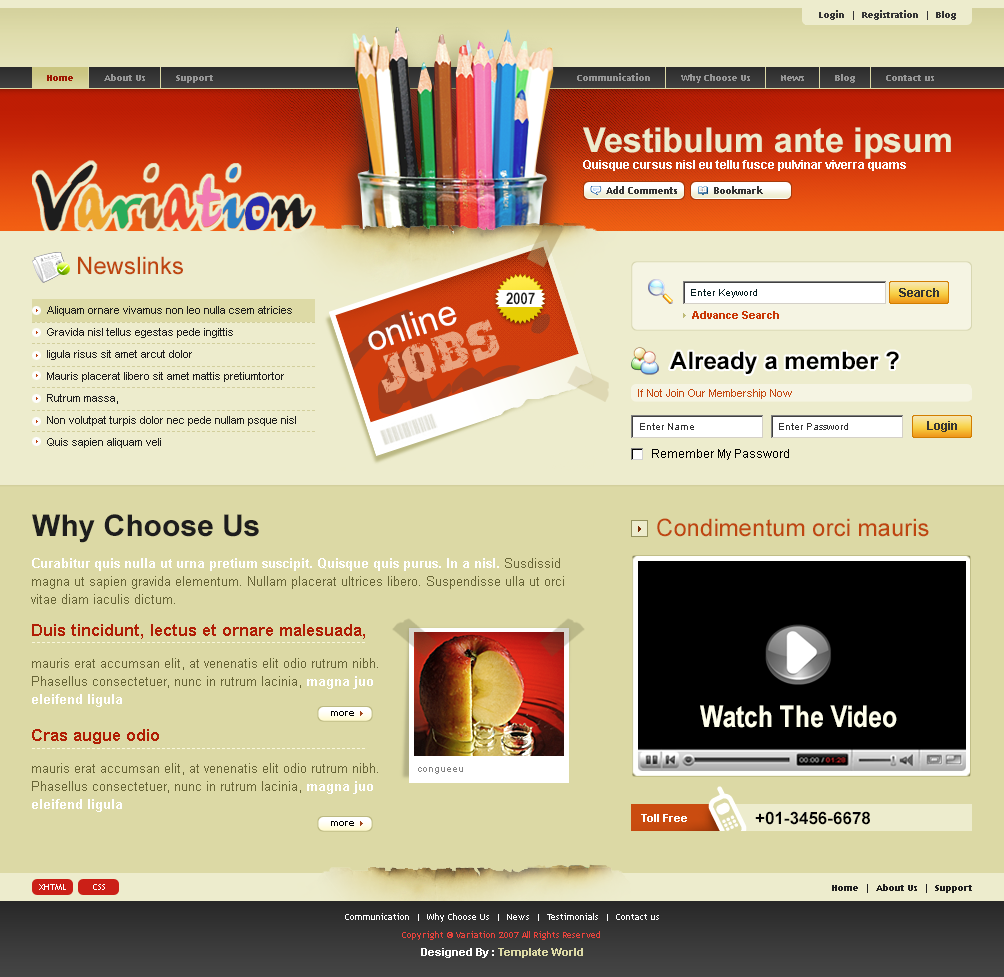
<style>
.page{position:relative;width:1004px;height:977px;background:#dcd9a5}
.page>*{position:absolute;margin:0}
.t1{font:9px "TrebuchetMS-Bold";color:#353535}
.t2{font:9px "TrebuchetMS-Bold";color:#969696}
.t3{font:9px "TrebuchetMS-Bold";color:#9d1600}
.t4{font:34px "Arial-BoldMT";color:#edeccd}
.t5{font:12px "Arial-BoldMT";color:#ffffff}
.t6{font:102.7px "Juergen";letter-spacing:0.025em;color:#1d1d1d;scale:0.75 1}
.t7{font:102.7px "Juergen";letter-spacing:0.025em;color:#eca62f;scale:0.75 1}
.t8{font:102.7px "Juergen";letter-spacing:0.025em;color:#29ac5a;scale:0.75 1}
.t9{font:102.7px "Juergen";letter-spacing:0.025em;color:#af5e29;scale:0.75 1}
.t10{font:102.7px "Juergen";letter-spacing:0.025em;color:#ec472e;scale:0.75 1}
.t11{font:102.7px "Juergen";letter-spacing:0.025em;color:#f27bb4;scale:0.75 1}
.t12{font:102.7px "Juergen";letter-spacing:0.025em;color:#2c7fc4;scale:0.75 1}
.t13{font:102.7px "Juergen";letter-spacing:0.025em;color:#292dae;scale:0.75 1}
.t14{font:10px "TrebuchetMS-Bold";color:#353535}
.t15{font:24px "ArialMT";color:#be460f}
.t16{font:16px "ArialNarrow-Bold";color:#1d1d1d;text-transform:uppercase}
.t17{font:10px "ArialMT";color:#071e22}
.t18{font:12px "Arial-BoldMT";color:#343434}
.t19{font:11px/22px "ArialMT";color:#1d1d1d}
.t20{font:35px "ArialMT";color:#ffffff}
.t21{font:11px "Arial-BoldMT";color:#c93705}
.t22{font:45px "Distress";color:#e9a37f;text-transform:uppercase}
.t23{font:24px "Arial-BoldMT";color:#000000}
.t24{font:11px "ArialMT";color:#c4480f}
.t25{font:10px "ArialMT";color:#343434}
.t26{font:12px "ArialMT";color:#000000}
.t27{font:30px "Arial-BoldMT";color:#1d1d1d}
.t28{font:13px/18px "ArialMT";color:#676436}
.t29{font:13px/18px "Arial-BoldMT";color:#ffffff}
.t30{font:13px/14px "ArialMT";color:#676436}
.t31{font:17px/18px "Arial-BoldMT";color:#b01d04}
.t32{font:10px "Arial-BoldMT";color:#000000}
.t33{font:30px "ArialNarrow-Bold";color:#ffffec}
.t34{font:10px "ArialMT";color:#818181}
.t35{font:11px "Arial-BoldMT";color:#ffffff}
.t36{font:17px "Arial-BoldMT";color:#000000}
.t37{font:9px "TrebuchetMS";color:#ffffff}
.t38{font:9px "TrebuchetMS-Bold";color:#1f1f1f}
.t39{font:9px "TrebuchetMS";color:#ed443d}
.t40{font:11px "Arial-BoldMT";color:#dcd9a5}
</style>
<div class="page">
<p class="t1" style="left:819px;top:10px;width:137px;height:10px">Login  |  Registration  |  Blog</p>
<p class="t2" style="left:47px;top:74px;width:166px;height:9px"><span class="t3">Home</span>          About Us          Support</p>
<p class="t2" style="left:577px;top:73px;width:357px;height:10px">Communication          Why Choose Us          News          Blog          Contact us</p>
<p class="t4" style="left:583px;top:127px;width:368px;height:32px">Vestibulum ante ipsum</p>
<p class="t5" style="left:583px;top:160px;width:323px;height:11px">Quisque cursus nisl eu tellu fusce pulvinar viverra quams</p>
<p class="t6" style="left:36px;top:164px;width:276px;height:67px">V<span class="t7">a</span><span class="t8">r</span><span class="t9">i</span><span class="t10">a</span><span class="t11">t</span><span class="t12">i</span><span class="t13">o</span>n</p>
<p class="t14" style="left:606px;top:186px;width:71px;height:8px">Add Comments</p>
<p class="t14" style="left:714px;top:186px;width:49px;height:8px">Bookmark</p>
<p class="t15" style="left:78px;top:256px;width:105px;height:19px">Newslinks</p>
<p class="t16" style="left:506px;top:292px;width:29px;height:13px">2007</p>
<p class="t17" style="left:691px;top:289px;width:66px;height:9px">Enter Keyword</p>
<p class="t18" style="left:899px;top:288px;width:40px;height:9px">Search</p>
<p class="t19" style="left:47px;top:306px;width:249px;height:142px">Aliquam ornare vivamus non leo nulla csem atricies Gravida nisl tellus egestas pede ingittis <br>ligula risus sit amet arcut dolor <br>Mauris placerat libero sit amet mattis pretiumtortor Rutrum massa,<br>Non volutpat turpis dolor nec pede nullam psque nisl Quis sapien aliquam veli</p>
<p class="t20" style="left:368px;top:306px;width:89px;height:44px;rotate:-19deg">online</p>
<p class="t21" style="left:692px;top:311px;width:87px;height:8px">Advance Search</p>
<p class="t22" style="left:381px;top:319px;width:119px;height:74px;rotate:-19deg">jobs</p>
<p class="t23" style="left:670px;top:351px;width:229px;height:23px">Already a member ?</p>
<p class="t24" style="left:638px;top:389px;width:154px;height:10px">If Not Join Our Membership Now</p>
<p class="t25" style="left:640px;top:423px;width:54px;height:7px">Enter Name</p>
<p class="t25" style="left:779px;top:423px;width:69px;height:7px">Enter Password</p>
<p class="t18" style="left:927px;top:421px;width:30px;height:11px">Login</p>
<p class="t26" style="left:652px;top:449px;width:137px;height:11px">Remember My Password</p>
<p class="t27" style="left:32px;top:514px;width:227px;height:29px">Why Choose Us</p>
<p class="t15" style="left:657px;top:518px;width:272px;height:19px">Condimentum orci mauris</p>
<p class="t28" style="left:31px;top:558px;width:533px;height:46px"><span class="t29">Curabitur quis nulla ut urna pretium suscipit. Quisque quis purus. In a nisl. </span>Susdissid magna ut sapien gravida elementum. Nullam placerat ultrices libero. Suspendisse ulla ut orci vitae diam iaculis dictum.</p>
<p class="t30" style="left:32px;top:624px;width:346px;height:83px"><span class="t31">Duis tincidunt, lectus et ornare malesuada, <br><br></span>mauris erat accumsan elit, at venenatis elit odio rutrum <span class="t28">nibh. Phasellus consectetuer, nunc in rutrum lacinia, </span><span class="t29">magna juo eleifend ligula</span></p>
<p class="t32" style="left:331px;top:711px;width:23px;height:5px">more</p>
<p class="t33" style="left:700px;top:705px;width:197px;height:23px">Watch The Video</p>
<p class="t30" style="left:32px;top:729px;width:346px;height:83px"><span class="t31">Cras augue odio<br><br></span>mauris erat accumsan elit, at venenatis elit odio rutrum <span class="t28">nibh. Phasellus consectetuer, nunc in rutrum lacinia, </span><span class="t29">magna juo eleifend ligula</span></p>
<p class="t34" style="left:418px;top:767px;width:45px;height:7px">congueeu</p>
<p class="t32" style="left:331px;top:821px;width:23px;height:5px">more</p>
<p class="t35" style="left:641px;top:814px;width:46px;height:8px">Toll Free</p>
<p class="t36" style="left:755px;top:811px;width:115px;height:14px">+01-3456-6678</p>
<p class="t37" style="left:39px;top:884px;width:27px;height:6px">XHTML</p>
<p class="t37" style="left:93px;top:884px;width:12px;height:6px">CSS</p>
<p class="t38" style="left:832px;top:884px;width:140px;height:9px">Home  |  About Us  |  Support</p>
<p class="t37" style="left:345px;top:913px;width:314px;height:9px">Communication  |  Why Choose Us  |  News  |  Testimonials  |  Contact us</p>
<p class="t39" style="left:402px;top:931px;width:198px;height:9px">Copyright © Variation 2007 All Rights Reserved</p>
<p class="t40" style="left:421px;top:948px;width:162px;height:10px"><span class="t35">Designed By : </span>Template World</p>
</div>
